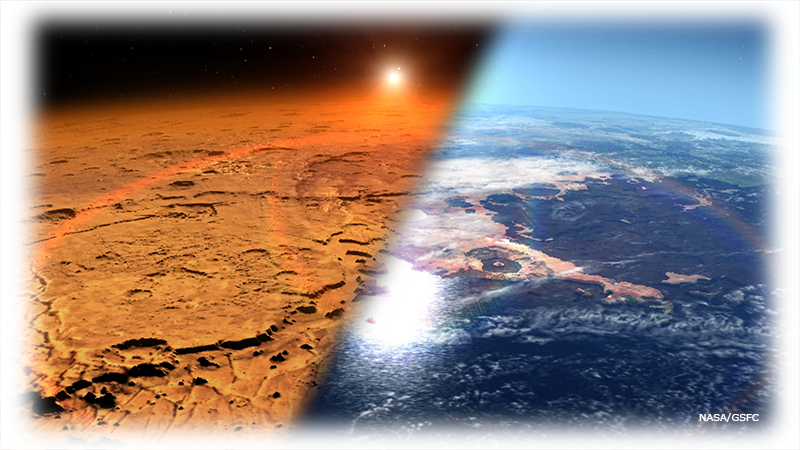
<style>
.page{position:relative;width:800px;height:450px}
.page>*{position:absolute;margin:0}
.t1{font:10px "Verdana";color:#ffffff}
</style>
<div class="page">
<p class="t1" style="left:699px;top:413px;width:60px;height:9px">NASA/GSFC</p>
</div>
